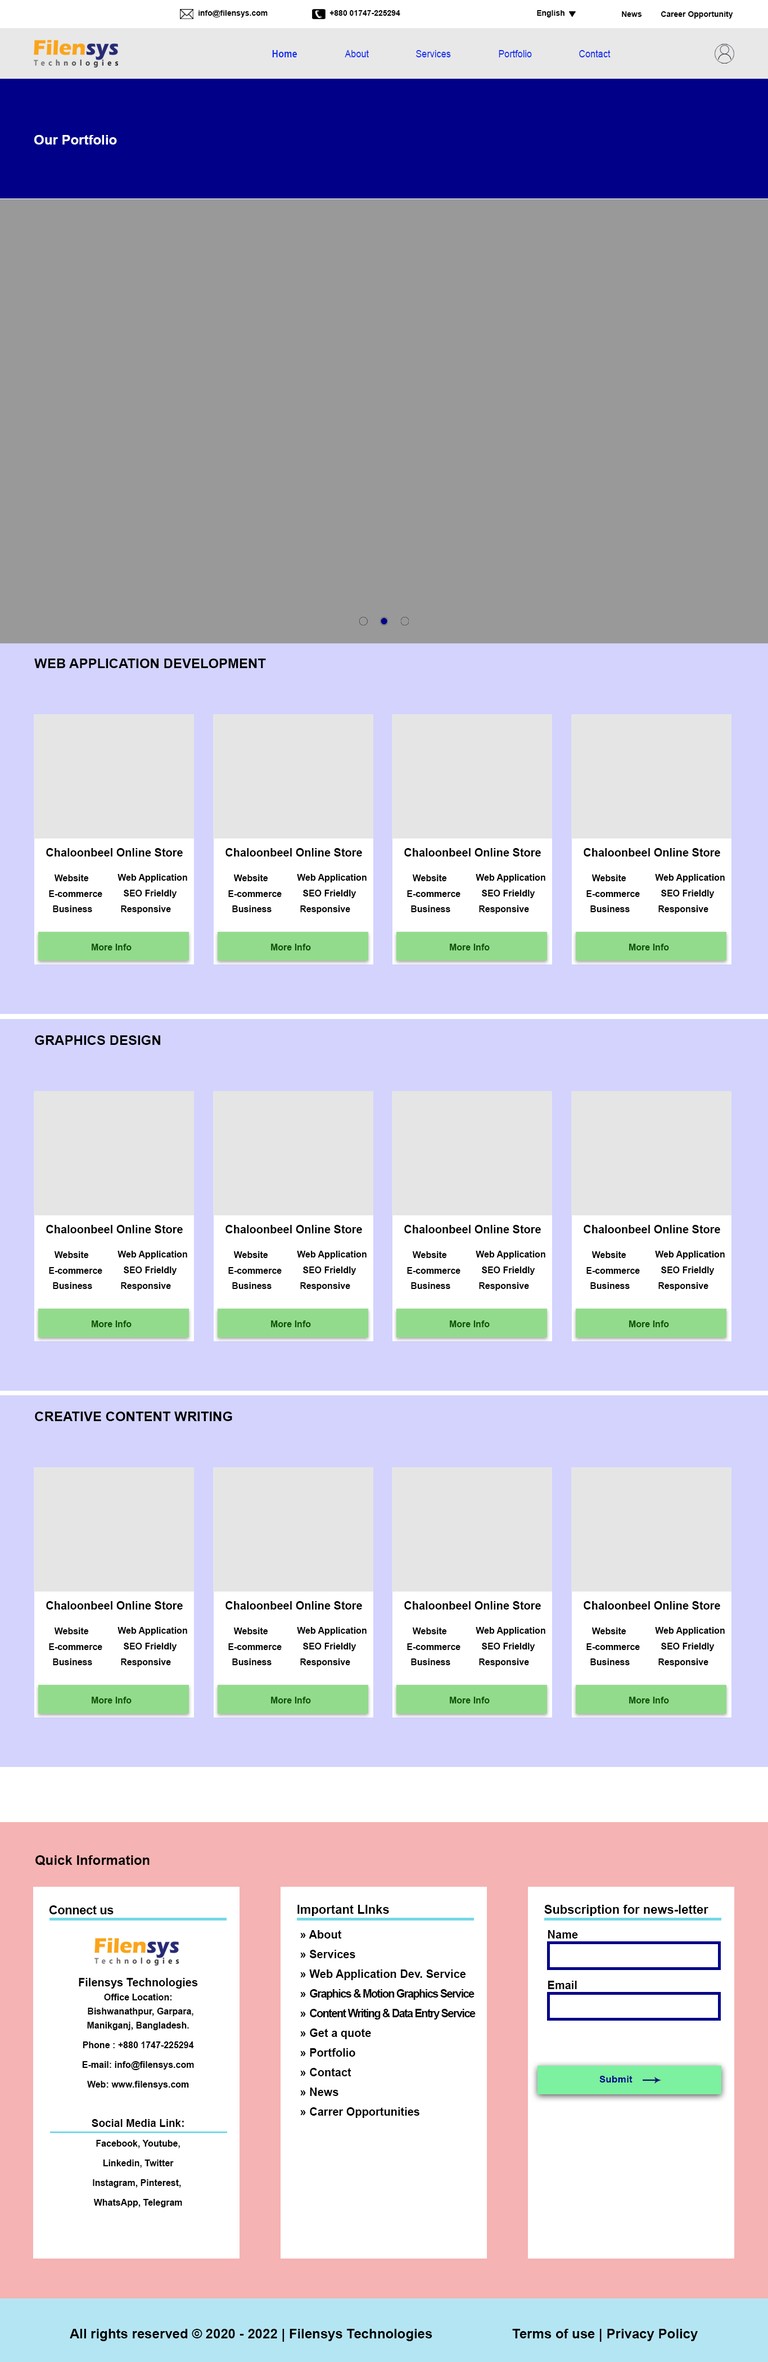
<style>
.page{position:relative;width:768px;height:2362px;background:#ffffff}
.page>*{position:absolute;margin:0}
.t1{font:7.9px "Arial-BoldMT";color:#030000}
.t2{font:10.1px "Arial-BoldMT";color:#152eeb;scale:0.9 1}
.t3{font:10.1px "ArialMT";color:#152eeb;scale:0.9 1}
.t4{font:13.5px "Arial-BoldMT";color:#ffffff}
.t5{font:13.5px "Arial-BoldMT";color:#000000}
.t6{font:11.2px "Arial-BoldMT";color:#000000}
.t7{font:9px "Arial-BoldMT";color:#000000}
.t8{font:9px "Arial-BoldMT";color:#0f5406}
.t9{font:13.5px "Arial-BoldMT";color:#030000}
.t10{font:12.4px "Arial-BoldMT";letter-spacing:-0.02em;color:#030000}
.t11{font:12.4px "Arial-BoldMT";color:#030000}
.t12{font:11.2px/19.7px "Arial-BoldMT";color:#030000}
.t13{font:11.2px/19.7px "Arial-BoldMT";letter-spacing:-0.08em;color:#030000}
.t14{font:11.2px "Arial-BoldMT";color:#030000}
.t15{font:9px/19.7px "Arial-BoldMT";color:#030000}
.t16{font:9px/14.1px "Arial-BoldMT";color:#030000}
.t17{font:10.7px/19.7px "Arial-BoldMT";color:#030000}
.t18{font:9px "Arial-BoldMT";color:#000088;scale:1.09 1}
</style>
<div class="page">
<p class="t1" style="left:199px;top:10px;width:69px;height:7px">info@filensys.com</p>
<p class="t1" style="left:330px;top:10px;width:70px;height:6px">+880 01747-225294</p>
<p class="t1" style="left:537px;top:10px;width:28px;height:7px">English</p>
<p class="t1" style="left:622px;top:11px;width:20px;height:6px">News</p>
<p class="t1" style="left:661px;top:11px;width:73px;height:8px">Career Opportunity</p>
<p class="t2" style="left:272px;top:50px;width:26px;height:7px">Home</p>
<p class="t3" style="left:345px;top:50px;width:24px;height:7px">About</p>
<p class="t3" style="left:416px;top:50px;width:35px;height:7px">Services</p>
<p class="t3" style="left:499px;top:50px;width:33px;height:7px">Portfolio</p>
<p class="t3" style="left:579px;top:50px;width:32px;height:7px">Contact</p>
<p class="t4" style="left:34px;top:135px;width:83px;height:10px">Our Portfolio</p>
<p class="t5" style="left:34px;top:659px;width:232px;height:9px">WEB APPLICATION DEVELOPMENT</p>
<p class="t6" style="left:46px;top:848px;width:137px;height:9px">Chaloonbeel Online Store</p>
<p class="t6" style="left:226px;top:848px;width:136px;height:9px">Chaloonbeel Online Store</p>
<p class="t6" style="left:404px;top:848px;width:137px;height:9px">Chaloonbeel Online Store</p>
<p class="t6" style="left:584px;top:848px;width:137px;height:9px">Chaloonbeel Online Store</p>
<p class="t7" style="left:54px;top:875px;width:35px;height:6px">Website</p>
<p class="t7" style="left:118px;top:874px;width:69px;height:9px">Web Application</p>
<p class="t7" style="left:233px;top:875px;width:35px;height:6px">Website</p>
<p class="t7" style="left:297px;top:874px;width:70px;height:9px">Web Application</p>
<p class="t7" style="left:412px;top:875px;width:35px;height:6px">Website</p>
<p class="t7" style="left:476px;top:874px;width:70px;height:9px">Web Application</p>
<p class="t7" style="left:592px;top:875px;width:35px;height:6px">Website</p>
<p class="t7" style="left:655px;top:874px;width:70px;height:9px">Web Application</p>
<p class="t7" style="left:49px;top:890px;width:53px;height:7px">E-commerce</p>
<p class="t7" style="left:124px;top:890px;width:53px;height:8px">SEO Frieldly</p>
<p class="t7" style="left:228px;top:890px;width:54px;height:7px">E-commerce</p>
<p class="t7" style="left:303px;top:890px;width:54px;height:8px">SEO Frieldly</p>
<p class="t7" style="left:407px;top:890px;width:54px;height:7px">E-commerce</p>
<p class="t7" style="left:482px;top:890px;width:54px;height:8px">SEO Frieldly</p>
<p class="t7" style="left:587px;top:890px;width:53px;height:7px">E-commerce</p>
<p class="t7" style="left:662px;top:890px;width:53px;height:8px">SEO Frieldly</p>
<p class="t7" style="left:53px;top:906px;width:39px;height:6px">Business</p>
<p class="t7" style="left:121px;top:906px;width:50px;height:8px">Responsive</p>
<p class="t7" style="left:232px;top:906px;width:40px;height:6px">Business</p>
<p class="t7" style="left:300px;top:906px;width:50px;height:8px">Responsive</p>
<p class="t7" style="left:411px;top:906px;width:40px;height:6px">Business</p>
<p class="t7" style="left:479px;top:906px;width:50px;height:8px">Responsive</p>
<p class="t7" style="left:591px;top:906px;width:39px;height:6px">Business</p>
<p class="t7" style="left:659px;top:906px;width:50px;height:8px">Responsive</p>
<p class="t8" style="left:92px;top:944px;width:40px;height:7px">More Info</p>
<p class="t8" style="left:271px;top:944px;width:40px;height:7px">More Info</p>
<p class="t8" style="left:450px;top:944px;width:40px;height:7px">More Info</p>
<p class="t8" style="left:629px;top:944px;width:40px;height:7px">More Info</p>
<p class="t5" style="left:35px;top:1036px;width:125px;height:9px">GRAPHICS DESIGN</p>
<p class="t6" style="left:46px;top:1225px;width:137px;height:9px">Chaloonbeel Online Store</p>
<p class="t6" style="left:226px;top:1225px;width:136px;height:9px">Chaloonbeel Online Store</p>
<p class="t6" style="left:404px;top:1225px;width:137px;height:9px">Chaloonbeel Online Store</p>
<p class="t6" style="left:584px;top:1225px;width:137px;height:9px">Chaloonbeel Online Store</p>
<p class="t7" style="left:54px;top:1252px;width:35px;height:6px">Website</p>
<p class="t7" style="left:118px;top:1251px;width:69px;height:8px">Web Application</p>
<p class="t7" style="left:233px;top:1252px;width:35px;height:6px">Website</p>
<p class="t7" style="left:297px;top:1251px;width:70px;height:8px">Web Application</p>
<p class="t7" style="left:412px;top:1252px;width:35px;height:6px">Website</p>
<p class="t7" style="left:476px;top:1251px;width:70px;height:8px">Web Application</p>
<p class="t7" style="left:592px;top:1252px;width:35px;height:6px">Website</p>
<p class="t7" style="left:655px;top:1251px;width:70px;height:8px">Web Application</p>
<p class="t7" style="left:49px;top:1267px;width:53px;height:7px">E-commerce</p>
<p class="t7" style="left:124px;top:1267px;width:53px;height:8px">SEO Frieldly</p>
<p class="t7" style="left:228px;top:1267px;width:54px;height:7px">E-commerce</p>
<p class="t7" style="left:303px;top:1267px;width:54px;height:8px">SEO Frieldly</p>
<p class="t7" style="left:407px;top:1267px;width:54px;height:7px">E-commerce</p>
<p class="t7" style="left:482px;top:1267px;width:54px;height:8px">SEO Frieldly</p>
<p class="t7" style="left:587px;top:1267px;width:53px;height:7px">E-commerce</p>
<p class="t7" style="left:662px;top:1267px;width:53px;height:8px">SEO Frieldly</p>
<p class="t7" style="left:53px;top:1282px;width:39px;height:7px">Business</p>
<p class="t7" style="left:121px;top:1282px;width:50px;height:9px">Responsive</p>
<p class="t7" style="left:232px;top:1282px;width:40px;height:7px">Business</p>
<p class="t7" style="left:300px;top:1282px;width:50px;height:9px">Responsive</p>
<p class="t7" style="left:411px;top:1282px;width:40px;height:7px">Business</p>
<p class="t7" style="left:479px;top:1282px;width:50px;height:9px">Responsive</p>
<p class="t7" style="left:591px;top:1282px;width:39px;height:7px">Business</p>
<p class="t7" style="left:659px;top:1282px;width:50px;height:9px">Responsive</p>
<p class="t8" style="left:92px;top:1321px;width:40px;height:7px">More Info</p>
<p class="t8" style="left:271px;top:1321px;width:40px;height:7px">More Info</p>
<p class="t8" style="left:450px;top:1321px;width:40px;height:7px">More Info</p>
<p class="t8" style="left:629px;top:1321px;width:40px;height:7px">More Info</p>
<p class="t5" style="left:35px;top:1412px;width:197px;height:9px">CREATIVE CONTENT WRITING</p>
<p class="t6" style="left:46px;top:1601px;width:137px;height:9px">Chaloonbeel Online Store</p>
<p class="t6" style="left:226px;top:1601px;width:136px;height:9px">Chaloonbeel Online Store</p>
<p class="t6" style="left:404px;top:1601px;width:137px;height:9px">Chaloonbeel Online Store</p>
<p class="t6" style="left:584px;top:1601px;width:137px;height:9px">Chaloonbeel Online Store</p>
<p class="t7" style="left:54px;top:1628px;width:35px;height:7px">Website</p>
<p class="t7" style="left:118px;top:1627px;width:69px;height:9px">Web Application</p>
<p class="t7" style="left:233px;top:1628px;width:35px;height:7px">Website</p>
<p class="t7" style="left:297px;top:1627px;width:70px;height:9px">Web Application</p>
<p class="t7" style="left:412px;top:1628px;width:35px;height:7px">Website</p>
<p class="t7" style="left:476px;top:1627px;width:70px;height:9px">Web Application</p>
<p class="t7" style="left:592px;top:1628px;width:35px;height:7px">Website</p>
<p class="t7" style="left:655px;top:1627px;width:70px;height:9px">Web Application</p>
<p class="t7" style="left:49px;top:1644px;width:53px;height:6px">E-commerce</p>
<p class="t7" style="left:124px;top:1643px;width:53px;height:9px">SEO Frieldly</p>
<p class="t7" style="left:228px;top:1644px;width:54px;height:6px">E-commerce</p>
<p class="t7" style="left:303px;top:1643px;width:54px;height:9px">SEO Frieldly</p>
<p class="t7" style="left:407px;top:1644px;width:54px;height:6px">E-commerce</p>
<p class="t7" style="left:482px;top:1643px;width:54px;height:9px">SEO Frieldly</p>
<p class="t7" style="left:587px;top:1644px;width:53px;height:6px">E-commerce</p>
<p class="t7" style="left:662px;top:1643px;width:53px;height:9px">SEO Frieldly</p>
<p class="t7" style="left:53px;top:1659px;width:39px;height:7px">Business</p>
<p class="t7" style="left:121px;top:1659px;width:50px;height:8px">Responsive</p>
<p class="t7" style="left:232px;top:1659px;width:40px;height:7px">Business</p>
<p class="t7" style="left:300px;top:1659px;width:50px;height:8px">Responsive</p>
<p class="t7" style="left:411px;top:1659px;width:40px;height:7px">Business</p>
<p class="t7" style="left:479px;top:1659px;width:50px;height:8px">Responsive</p>
<p class="t7" style="left:591px;top:1659px;width:39px;height:7px">Business</p>
<p class="t7" style="left:659px;top:1659px;width:50px;height:8px">Responsive</p>
<p class="t8" style="left:92px;top:1697px;width:40px;height:7px">More Info</p>
<p class="t8" style="left:271px;top:1697px;width:40px;height:7px">More Info</p>
<p class="t8" style="left:450px;top:1697px;width:40px;height:7px">More Info</p>
<p class="t8" style="left:629px;top:1697px;width:40px;height:7px">More Info</p>
<p class="t9" style="left:35px;top:1856px;width:115px;height:10px">Quick Information</p>
<p class="t10" style="left:49px;top:1906px;width:65px;height:9px">Connect us</p>
<p class="t11" style="left:298px;top:1905px;width:91px;height:11px">Important LInks</p>
<p class="t11" style="left:544px;top:1905px;width:165px;height:11px">Subscription for news-letter</p>
<p class="t12" style="left:300px;top:1930px;width:176px;height:188px">» About <br>» Services<br>» Web Application Dev. Service<br>» <span class="t13">Graphics &amp; Motion Graphics Service<br></span>» <span class="t13">Content Writing &amp; Data Entry Service<br></span>» Get a quote<br>» Portfolio<br>» Contact<br>» News<br>» Carrer Opportunities</p>
<p class="t14" style="left:548px;top:1930px;width:30px;height:9px">Name</p>
<p class="t15" style="left:79px;top:1978px;width:119px;height:230px;text-align:center"><span class="t12"><br><br>Filensys Technologies<br></span><span class="t16">Office Location:<br>  Bishwanathpur, Garpara,<br>Manikganj, Bangladesh.<br></span>Phone : +880 1747-225294<br>E-mail: info@filensys.com<br>Web: www.filensys.com<br><br><span class="t17">Social Media Link:<br></span>Facebook, Youtube,<br>Linkedin, Twitter<br>Instagram, Pinterest, <br>WhatsApp, Telegram</p>
<p class="t14" style="left:548px;top:1981px;width:29px;height:9px">Email</p>
<p class="t18" style="left:600px;top:2076px;width:33px;height:7px">Submit</p>
<p class="t9" style="left:70px;top:2329px;width:363px;height:13px">All rights reserved © 2020 - 2022 | Filensys Technologies</p>
<p class="t9" style="left:512px;top:2329px;width:186px;height:13px">Terms of use | Privacy Policy</p>
</div>
